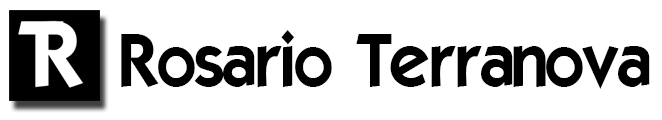
<style>
.page{position:relative;width:662px;height:120px;background:#ffffff}
.page>*{position:absolute;margin:0}
.t1{font:72px "ELEGANCE";color:#000000}
</style>
<div class="page">
<p class="t1" style="left:121px;top:30px;width:529px;height:59px">Rosario Terranova</p>
</div>
